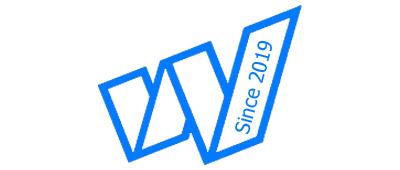
<style>
.page{position:relative;width:400px;height:170px;background:#ffffff}
.page>*{position:absolute;margin:0}
.t1{font:19.8px "Tahoma";color:#007bff}
</style>
<div class="page">
<p class="t1" style="left:235px;top:40px;width:37px;height:94px;rotate:-75deg">Since 2019</p>
</div>
